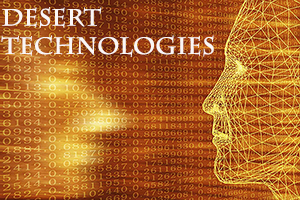
<style>
.page{position:relative;width:300px;height:200px}
.page>*{position:absolute;margin:0}
.t1{font:23.6px "CharlemagneStd-Bold";color:#faf6f6}
</style>
<div class="page">
<p class="t1" style="left:1px;top:7px;width:213px;height:50px">Desert                           Technologies</p>
</div>
